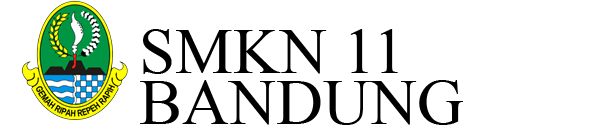
<style>
.page{position:relative;width:600px;height:137px;background:#ffffff}
.page>*{position:absolute;margin:0}
.t1{font:65px "TimesNewRomanPSMT";color:#000000}
</style>
<div class="page">
<p class="t1" style="left:143px;top:29px;width:255px;height:45px">SMKN 11</p>
<p class="t1" style="left:140px;top:80px;width:323px;height:45px">BANDUNG</p>
</div>
